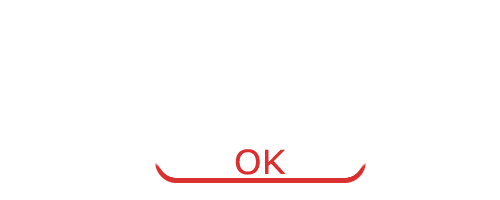
<style>
.page{position:relative;width:500px;height:200px;background:#ffffff}
.page>*{position:absolute;margin:0}
.t1{font:33.3px "Verdana";color:#da2f2f;scale:1.05 1}
</style>
<div class="page">
<p class="t1" style="left:235px;top:149px;width:51px;height:26px">OK</p>
</div>
